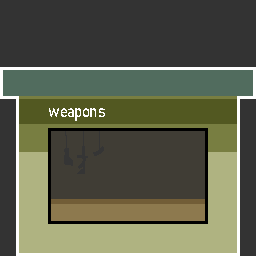
<style>
.page{position:relative;width:256px;height:256px;background:#333333}
.page>*{position:absolute;margin:0}
.t1{font:16.5px "Bahnschrift";color:#ffffff;scale:0.91 1}
</style>
<div class="page">
<p class="t1" style="left:49px;top:108px;width:56px;height:13px">weapons</p>
</div>
